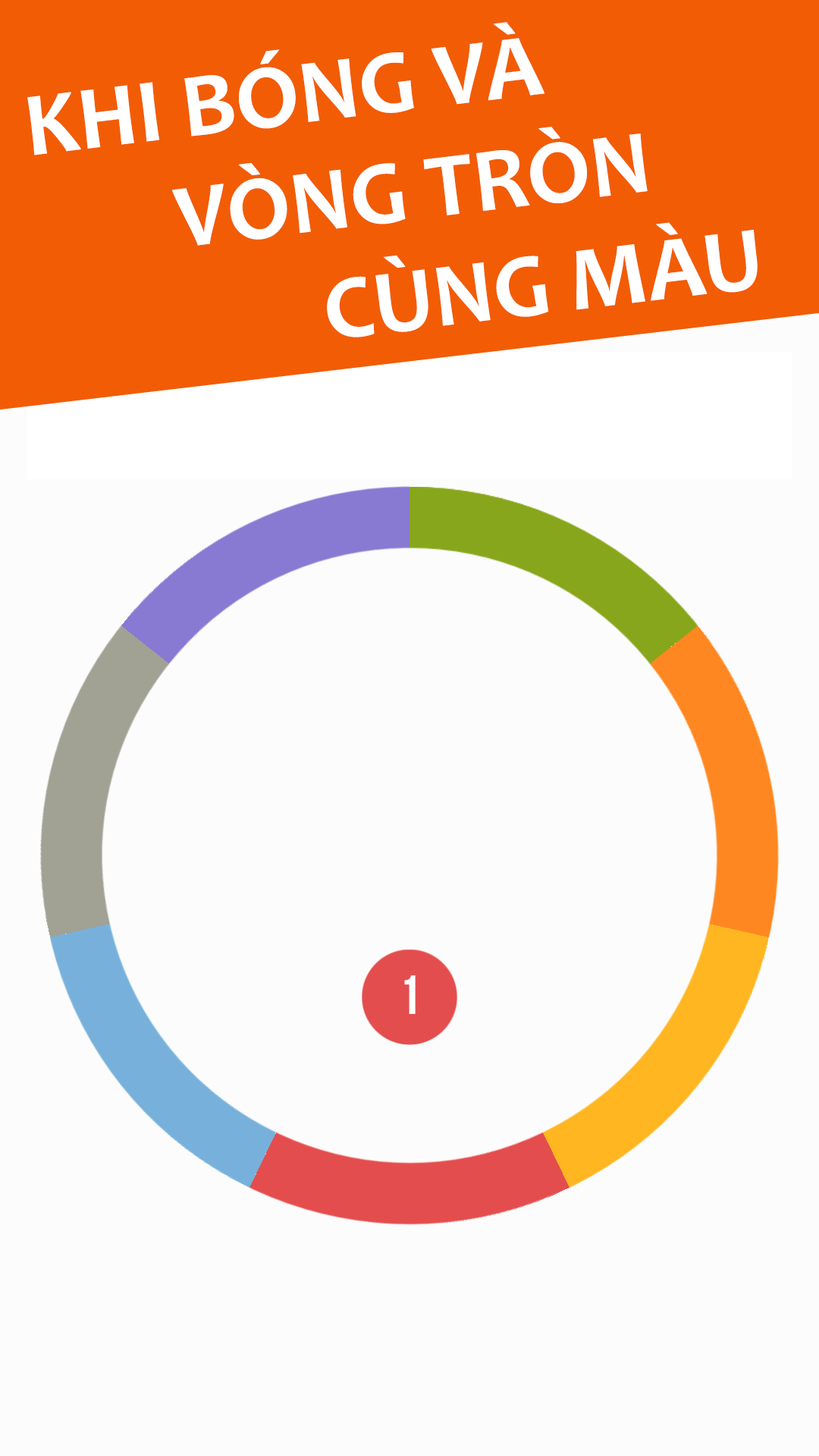
<style>
.page{position:relative;width:819px;height:1456px;background:#fcfcfc}
.page>*{position:absolute;margin:0}
.t1{font:91px "Candara-Bold";color:#ffffff}
</style>
<div class="page">
<p class="t1" style="left:27px;top:22px;width:731px;height:315px;rotate:-7deg">KHI BÓNG VÀ <br>     VÒNG TRÒN <br>          CÙNG MÀU</p>
</div>
